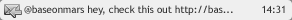
<style>
.page{position:relative;width:292px;height:20px;background:#efefef}
.page>*{position:absolute;margin:0}
.t1{font:10px "TrebuchetMS";color:#333333}
</style>
<div class="page">
<p class="t1" style="left:24px;top:5px;width:209px;height:10px">@baseonmars hey, check this out http://bas...</p>
<p class="t1" style="left:262px;top:5px;width:23px;height:8px">14:31</p>
</div>
